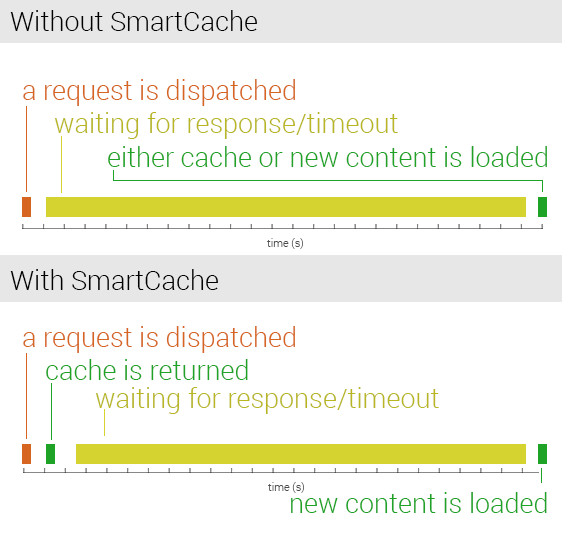
<style>
.page{position:relative;width:562px;height:536px;background:#ffffff}
.page>*{position:absolute;margin:0}
.t1{font:27px "Roboto-Light";color:#000000}
.t2{font:27px "Roboto-Light";color:#d66522}
.t3{font:27px "Roboto-Light";color:#b8b623}
.t4{font:27px "Roboto-Light";color:#1fa326}
.t5{font:11px "Roboto-Light";color:#4c4c4c}
</style>
<div class="page">
<p class="t1" style="left:10px;top:10px;width:247px;height:21px">Without SmartCache</p>
<p class="t2" style="left:23px;top:79px;width:272px;height:27px">a request is dispatched</p>
<p class="t3" style="left:54px;top:112px;width:344px;height:27px">waiting for response/timeout</p>
<p class="t4" style="left:108px;top:146px;width:439px;height:21px">either cache or new content is loaded</p>
<p class="t5" style="left:267px;top:238px;width:36px;height:11px">time (s)</p>
<p class="t1" style="left:10px;top:269px;width:208px;height:21px">With SmartCache</p>
<p class="t2" style="left:23px;top:326px;width:272px;height:27px">a request is dispatched</p>
<p class="t4" style="left:46px;top:359px;width:202px;height:21px">cache is returned</p>
<p class="t3" style="left:95px;top:387px;width:344px;height:27px">waiting for response/timeout</p>
<p class="t5" style="left:268px;top:482px;width:36px;height:11px">time (s)</p>
<p class="t4" style="left:291px;top:492px;width:256px;height:21px">new content is loaded</p>
</div>
